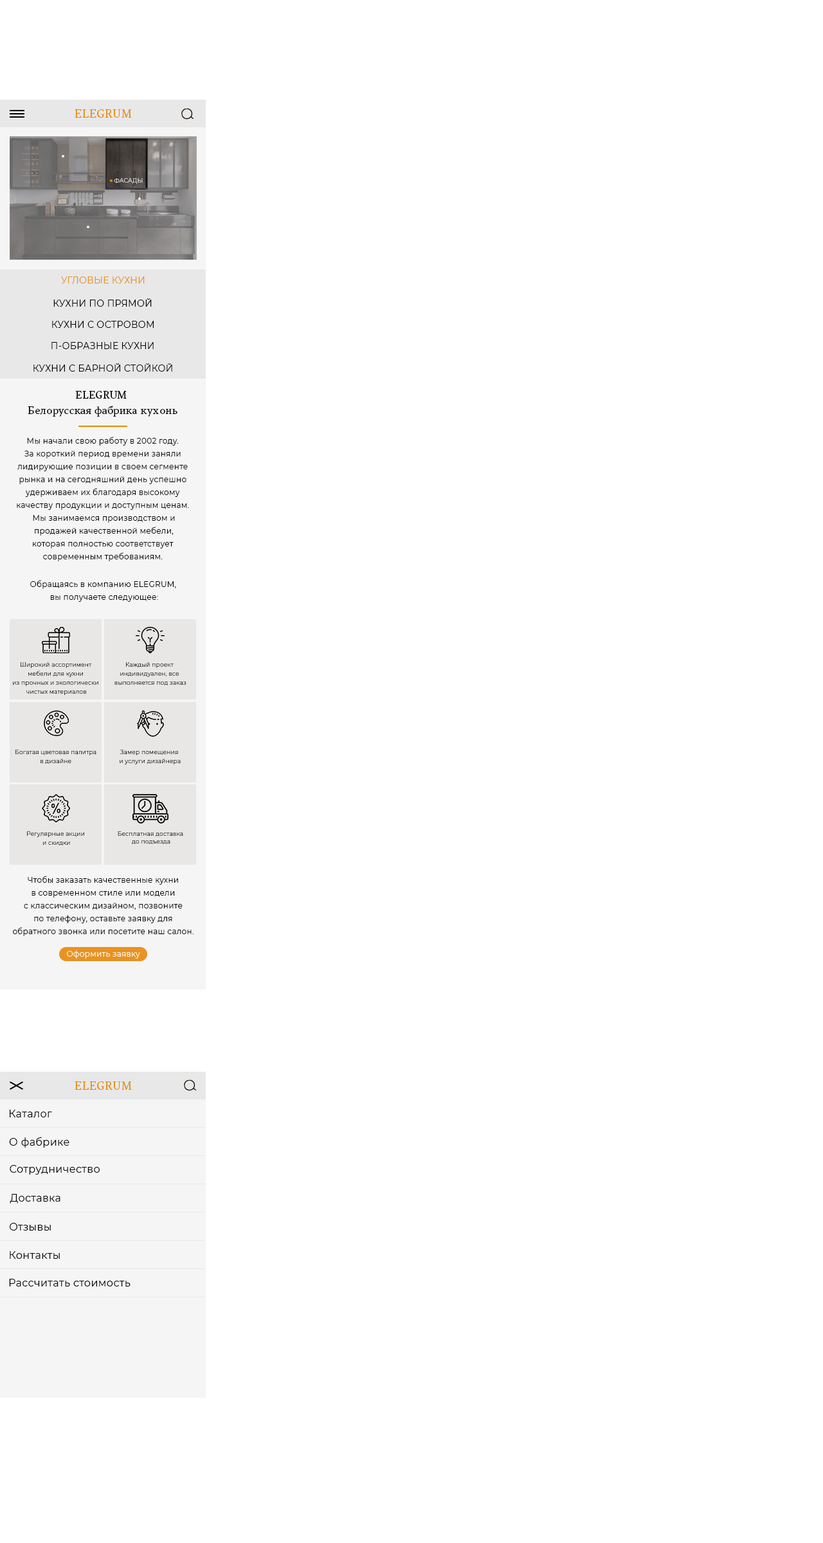
<style>
.page{position:relative;width:823px;height:1543px;background:#ffffff}
.page>*{position:absolute;margin:0}
.t1{font:11.6px "Gregor";letter-spacing:0.025em;color:#e78b02}
.t2{font:5.8px "Montserrat-Regular";letter-spacing:0.025em;color:#e3e3e3}
.t3{font:9px "Montserrat-Regular";letter-spacing:0.025em;color:#e89321}
.t4{font:9px "Montserrat-Regular";letter-spacing:0.025em;color:#000000}
.t5{font:10.3px/15.4px "Gregor";letter-spacing:0.025em;color:#010101}
.t6{font:7.7px/12.9px "Montserrat-Regular";letter-spacing:0.025em;color:#010101}
.t7{font:7.7px/12.9px "Montserrat-Regular";letter-spacing:0.025em;color:#000000}
.t8{font:5.8px/9px "Montserrat-Light";letter-spacing:0.025em;color:#000000}
.t9{font:5.8px/7.7px "Montserrat-Light";letter-spacing:0.025em;color:#000000}
.t10{font:10.3px "Montserrat-Regular";letter-spacing:0.025em;color:#000000}
</style>
<div class="page">
<p class="t1" style="left:75px;top:109px;width:57px;height:9px">ELEGRUM</p>
<p class="t2" style="left:114px;top:178px;width:29px;height:6px">ФАСАДЫ</p>
<p class="t3" style="left:61px;top:276px;width:84px;height:8px">УГЛОВЫЕ КУХНИ</p>
<p class="t4" style="left:53px;top:298px;width:99px;height:9px">КУХНИ ПО ПРЯМОЙ</p>
<p class="t4" style="left:52px;top:321px;width:102px;height:7px">КУХНИ С ОСТРОВОМ</p>
<p class="t4" style="left:51px;top:342px;width:103px;height:7px">П-ОБРАЗНЫЕ КУХНИ</p>
<p class="t4" style="left:33px;top:363px;width:139px;height:9px">КУХНИ С БАРНОЙ СТОЙКОЙ</p>
<p class="t5" style="left:28px;top:391px;width:149px;height:26px;text-align:center">ELEGRUM <br>Белорусская фабрика кухонь</p>
<p class="t6" style="left:17px;top:437px;width:172px;height:124px;text-align:center">Мы начали свою работу в 2002 году. <br>За короткий период времени заняли <br>лидирующие позиции в своем сегменте <br>рынка и на сегодняшний день успешно <br>удерживаем их благодаря высокому <br>качеству продукции и доступным ценам. <br>Мы занимаемся производством и<br> продажей качественной мебели, <br>которая полностью соответствует <br>современным требованиям.</p>
<p class="t7" style="left:30px;top:580px;width:146px;height:22px;text-align:center">Обращаясь в компанию ELEGRUM, <br>вы получаете следующее:</p>
<p class="t8" style="left:13px;top:662px;width:85px;height:33px;text-align:center">Широкий ассортимент <br>мебели для кухни <br>из прочных и экологически <br>чистых материалов</p>
<p class="t8" style="left:114px;top:662px;width:72px;height:23px;text-align:center">Каждый проект <br>индивидуален, все <br>выполняется под заказ</p>
<p class="t8" style="left:15px;top:750px;width:81px;height:14px;text-align:center">Богатая цветовая палитра<br>в дизайне</p>
<p class="t8" style="left:120px;top:750px;width:61px;height:14px;text-align:center">Замер помещения <br>и услуги дизайнера</p>
<p class="t8" style="left:27px;top:831px;width:57px;height:14px;text-align:center">Регулярные акции <br>и скидки</p>
<p class="t9" style="left:118px;top:831px;width:65px;height:13px;text-align:center">Бесплатная доставка <br>до подъезда</p>
<p class="t7" style="left:13px;top:876px;width:181px;height:60px;text-align:center">Чтобы заказать качественные кухни <br>в современном стиле или модели <br>с классическим дизайном, позвоните <br>по телефону, оставьте заявку для <br>обратного звонка или посетите наш салон.</p>
<p class="t1" style="left:75px;top:1081px;width:57px;height:9px">ELEGRUM</p>
<p class="t10" style="left:10px;top:1110px;width:42px;height:7px">Каталог</p>
<p class="t10" style="left:9px;top:1137px;width:60px;height:11px">О фабрике</p>
<p class="t10" style="left:10px;top:1165px;width:90px;height:9px">Сотрудничество</p>
<p class="t10" style="left:10px;top:1194px;width:50px;height:9px">Доставка</p>
<p class="t10" style="left:10px;top:1223px;width:41px;height:7px">Отзывы</p>
<p class="t10" style="left:10px;top:1251px;width:50px;height:8px">Контакты</p>
<p class="t10" style="left:9px;top:1279px;width:121px;height:7px">Рассчитать стоимость</p>
</div>
